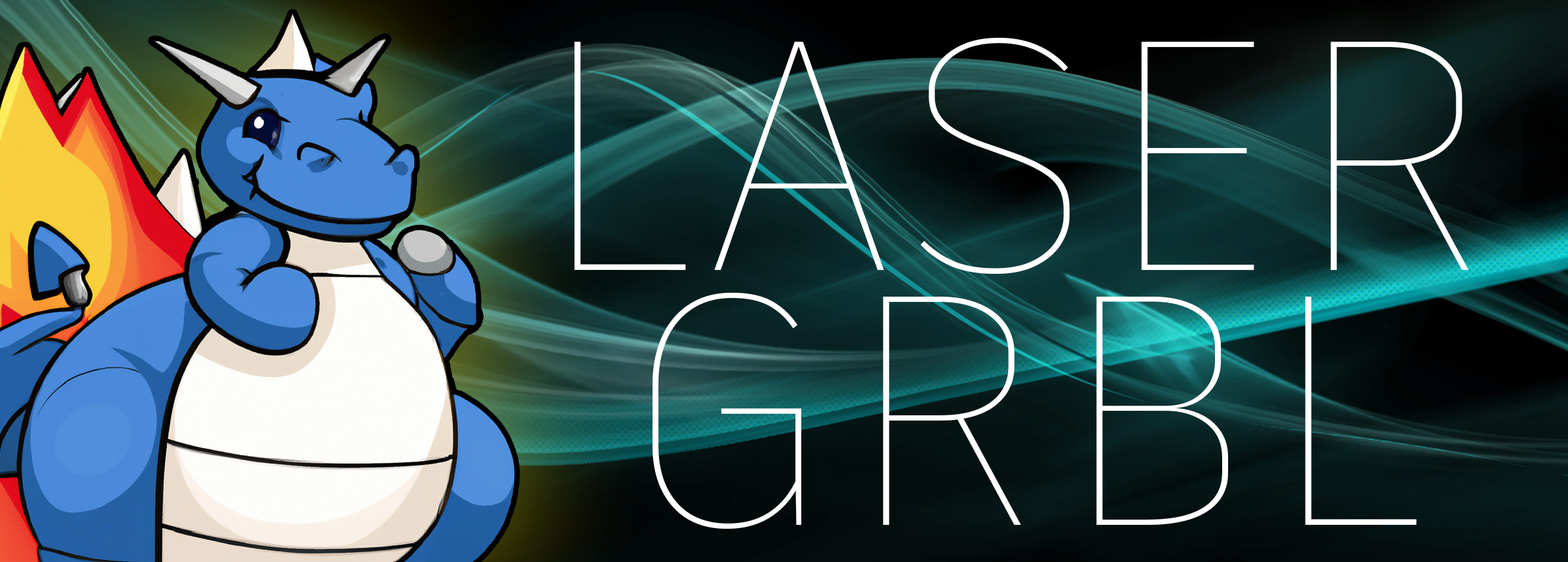
<style>
.page{position:relative;width:1568px;height:562px}
.page>*{position:absolute;margin:0}
.t1{font:326.3px "ArtifaktElement-Hair";color:#ffffff}
</style>
<div class="page">
<p class="t1" style="left:574px;top:38px;width:895px;height:236px">LASER</p>
<p class="t1" style="left:653px;top:293px;width:764px;height:236px">GRBL</p>
</div>
